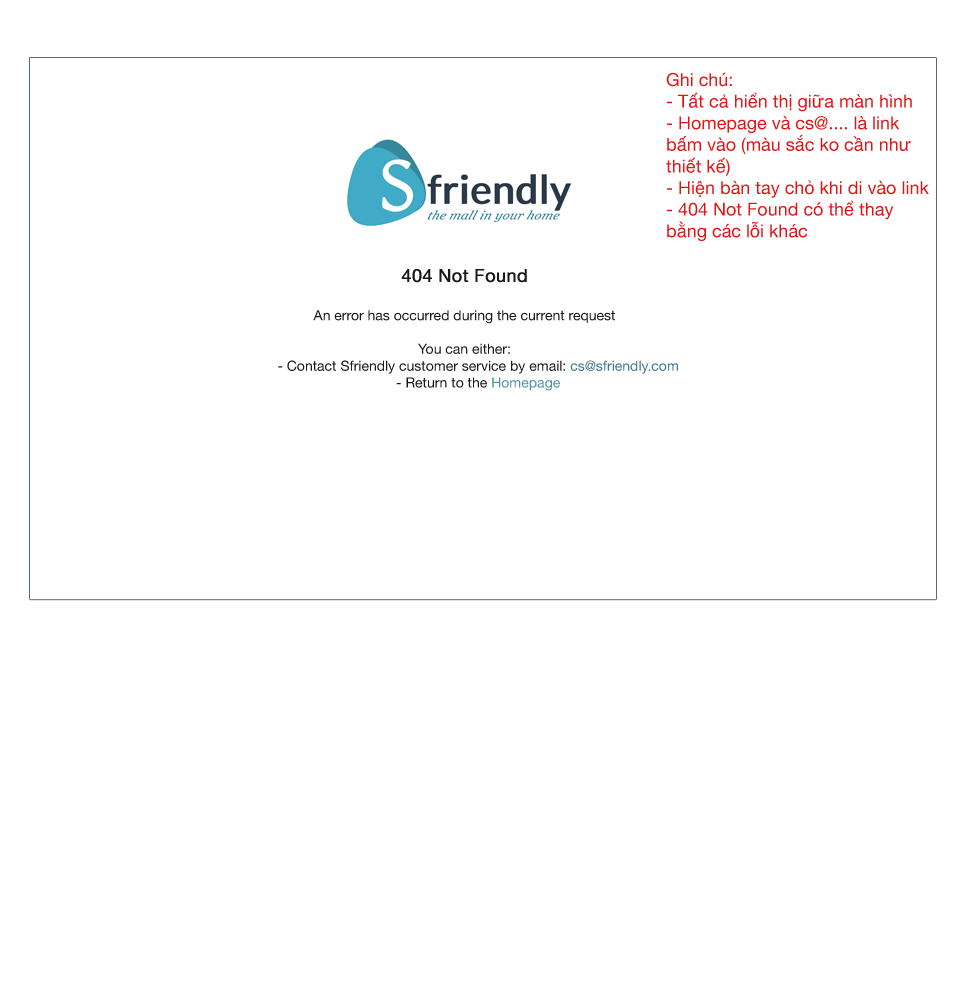
<style>
.page{position:relative;width:960px;height:1000px;background:#ffffff}
.page>*{position:absolute;margin:0}
.t1{font:18px "HelveticaNeue";color:#e21515}
.t2{font:14px "HelveticaNeue";color:#191919}
.t3{font:18px "HelveticaNeue";color:#191919;font-weight:bold}
</style>
<div class="page">
<p class="t1" style="left:666px;top:72px;width:263px;height:169px">Ghi chú:<br>- Tất cả hiển thị giữa màn hình<br>- Homepage và cs@.... là link<br>bấm vào (màu sắc ko cần như<br>thiết kế)<br>- Hiện bàn tay chỏ khi di vào link<br>- 404 Not Found có thể thay<br>bằng các lỗi khác</p>
<p class="t2" style="left:278px;top:269px;width:400px;height:122px;text-align:center"><span class="t3">404 Not Found<br><br></span>An error has occurred during the current request<br><br>You can either:<br>       - Contact Sfriendly customer service by email: cs@sfriendly.com<br>       - Return to the Homepage</p>
</div>
